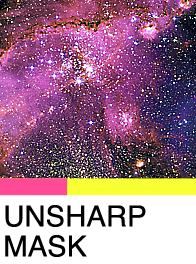
<style>
.page{position:relative;width:196px;height:264px;background:#ffffff}
.page>*{position:absolute;margin:0}
.t1{font:28.9px/30px "Helvetica";color:#000000}
</style>
<div class="page">
<p class="t1" style="left:5px;top:205px;width:141px;height:52px">UNSHARP<br>MASK</p>
</div>
